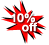
<style>
.page{position:relative;width:49px;height:45px;background:#ffffff}
.page>*{position:absolute;margin:0}
.t1{font:12px "HelveticaNeueLTPro-Bd";color:#ffffff}
</style>
<div class="page">
<p class="t1" style="left:11px;top:13px;width:24px;height:10px">10%</p>
<p class="t1" style="left:22px;top:22px;width:15px;height:10px">off</p>
</div>
